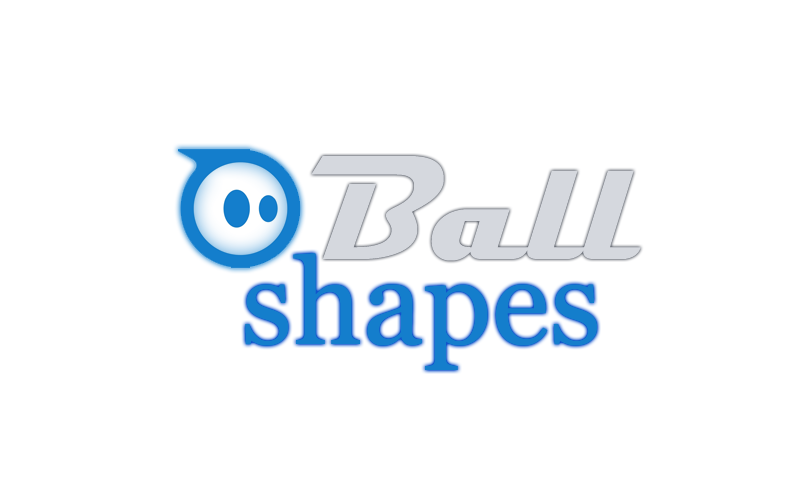
<style>
.page{position:relative;width:800px;height:500px;background:#ffffff}
.page>*{position:absolute;margin:0}
.t1{font:150px "Magneto-Bold";color:#d5d8de}
.t2{font:120px "Vani";color:#147ecc}
</style>
<div class="page">
<p class="t1" style="left:311px;top:156px;width:330px;height:105px">Ball</p>
<p class="t2" style="left:245px;top:253px;width:352px;height:117px">shapes</p>
</div>
